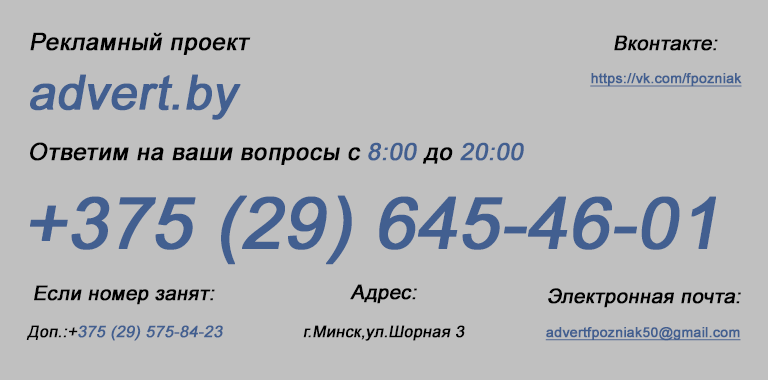
<style>
.page{position:relative;width:768px;height:380px;background:#c0c0c0}
.page>*{position:absolute;margin:0}
.t1{font:24px "ArialMT";color:#000000;font-weight:bold;font-style:italic}
.t2{font:20px "ArialMT";color:#000000;font-weight:bold;font-style:italic}
.t3{font:48px "ArialMT";color:#425f90;font-weight:bold;font-style:italic}
.t4{font:14px "ArialMT";color:#425f90;font-weight:bold;text-decoration:underline}
.t5{font:24px "ArialMT";color:#425f90;font-weight:bold;font-style:italic}
.t6{font:72px "ArialMT";color:#425f90;font-weight:bold;font-style:italic}
.t7{font:16px "ArialMT";color:#425f90;font-weight:bold;font-style:italic}
.t8{font:16px "ArialMT";color:#000000;font-weight:bold;font-style:italic}
</style>
<div class="page">
<p class="t1" style="left:30px;top:32px;width:221px;height:23px">Рекламный проект</p>
<p class="t2" style="left:614px;top:35px;width:104px;height:16px">Вконтакте:</p>
<p class="t3" style="left:30px;top:74px;width:211px;height:46px">advert.by</p>
<p class="t4" style="left:590px;top:73px;width:152px;height:14px">https://vk.com/fpozniak</p>
<p class="t1" style="left:30px;top:142px;width:494px;height:23px">Ответим на ваши вопросы с <span class="t5">8:00</span> до <span class="t5">20:00</span></p>
<p class="t6" style="left:30px;top:195px;width:686px;height:70px">+375 (29) 645-46-01</p>
<p class="t2" style="left:34px;top:285px;width:181px;height:20px">Если номер занят:</p>
<p class="t2" style="left:350px;top:284px;width:67px;height:20px">Адрес:</p>
<p class="t2" style="left:548px;top:288px;width:193px;height:20px">Электронная почта:</p>
<p class="t7" style="left:26px;top:325px;width:197px;height:16px"><span class="t8">Доп.:+</span>375 (29) 575-84-23</p>
<p class="t8" style="left:303px;top:325px;width:162px;height:16px">г.Минск,ул.Шорная 3</p>
<p class="t4" style="left:545px;top:327px;width:196px;height:14px">advertfpozniak50@gmail.com</p>
</div>
